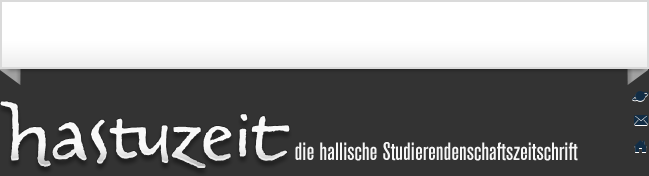
<style>
.page{position:relative;width:649px;height:176px;background:#333333}
.page>*{position:absolute;margin:0}
.t1{font:24.8px "AkzidenzGrotConBQ-Medium";color:#f7f7f7}
</style>
<div class="page">
<p class="t1" style="left:295px;top:142px;width:283px;height:19px">die hallische Studierendenschaftszeitschrift</p>
</div>
